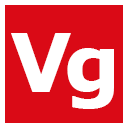
<style>
.page{position:relative;width:128px;height:128px;background:#da0a16}
.page>*{position:absolute;margin:0}
.t1{font:80.7px "Verdana-Bold";color:#ffffff}
</style>
<div class="page">
<p class="t1" style="left:11px;top:33px;width:60px;height:59px">V</p>
<p class="t1" style="left:67px;top:48px;width:47px;height:61px">g</p>
</div>
